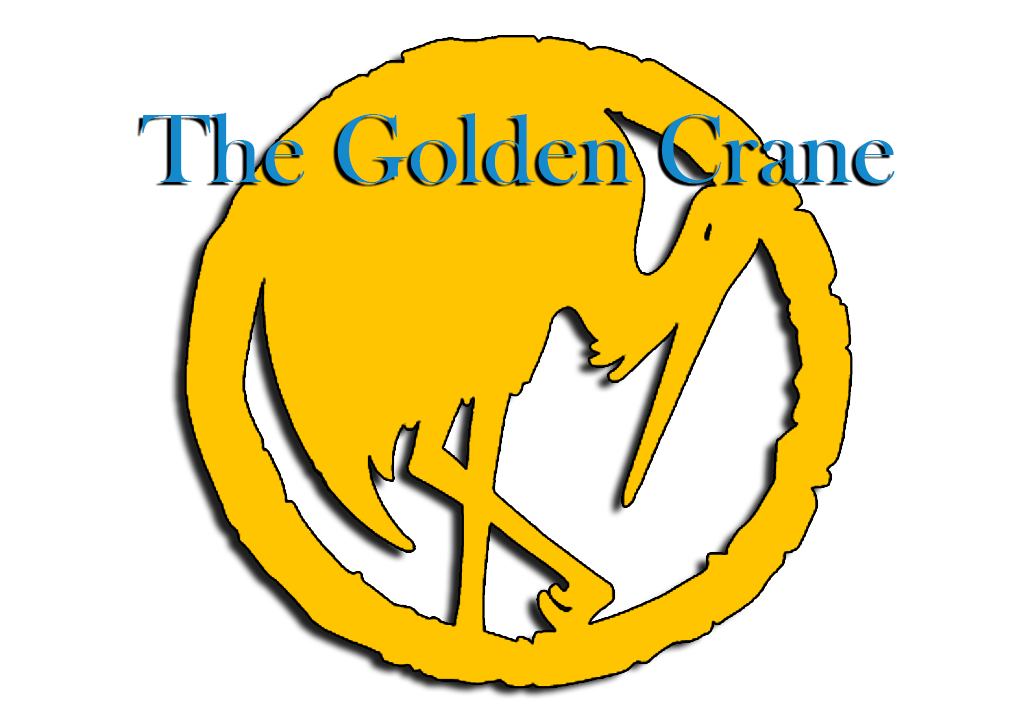
<style>
.page{position:relative;width:1024px;height:723px;background:#ffffff}
.page>*{position:absolute;margin:0}
.t1{font:99.7px "BaskOldFace";color:#148acc}
</style>
<div class="page">
<p class="t1" style="left:142px;top:113px;width:753px;height:70px">The Golden Crane</p>
</div>
